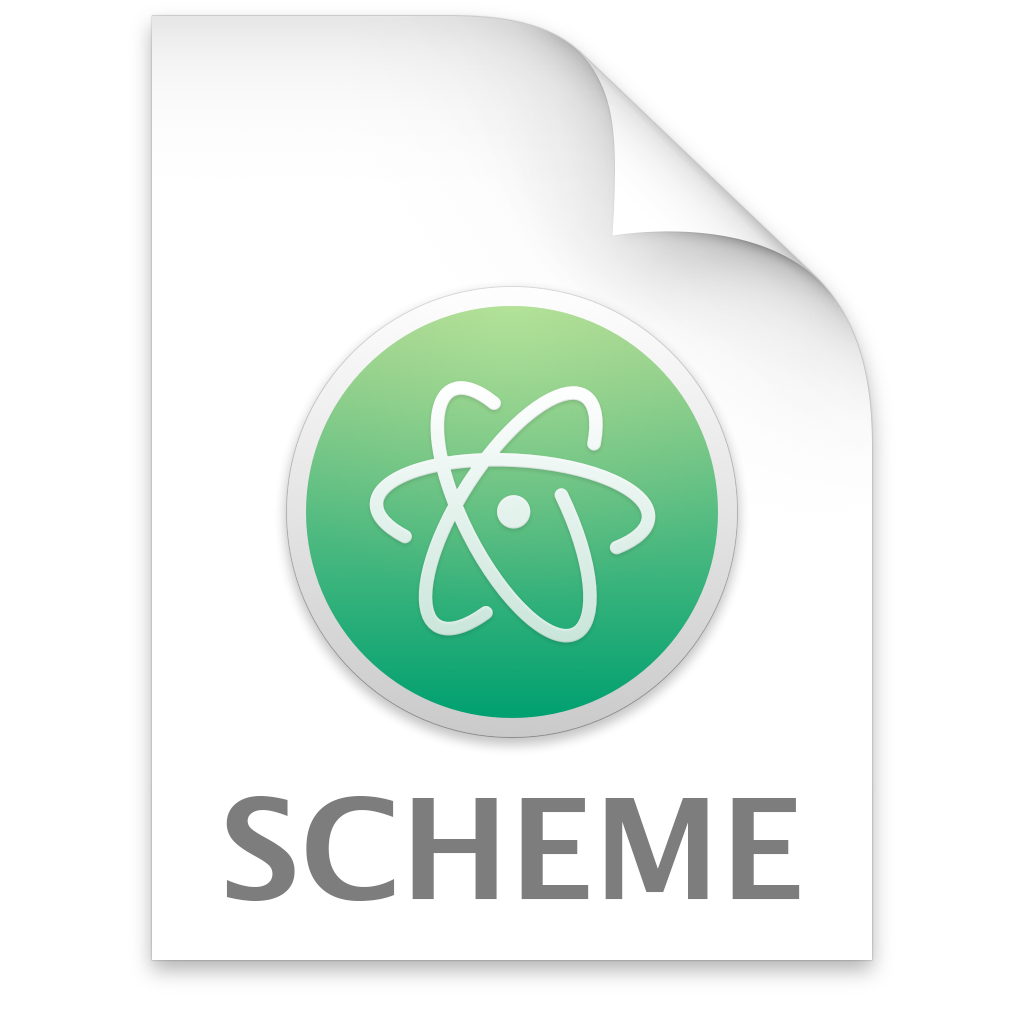
<style>
.page{position:relative;width:1024px;height:1024px;background:#ffffff}
.page>*{position:absolute;margin:0}
.t1{font:140px "LucidaGrande-Bold";color:#7d7d7d}
</style>
<div class="page">
<p class="t1" style="left:226px;top:796px;width:574px;height:105px">SCHEME</p>
</div>
